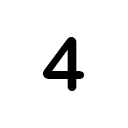
<style>
.page{position:relative;width:128px;height:128px;background:#ffffff}
.page>*{position:absolute;margin:0}
.t1{font:73px "ArialRoundedMTBold";letter-spacing:0.4em;color:#000000}
</style>
<div class="page">
<p class="t1" style="left:42px;top:37px;width:43px;height:54px">4</p>
</div>
